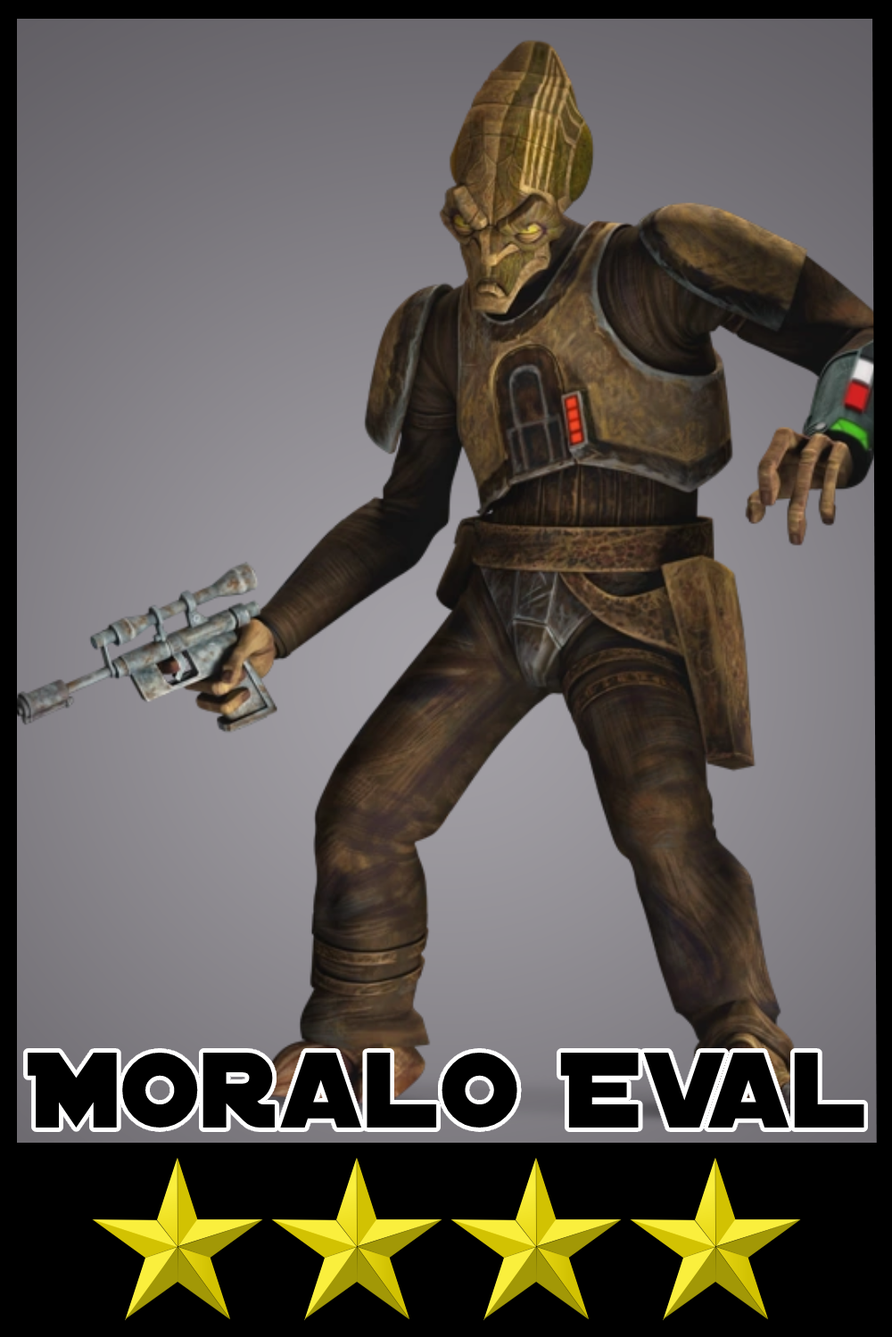
<style>
.page{position:relative;width:892px;height:1337px}
.page>*{position:absolute;margin:0}
.t1{font:115.4px "DistantGalaxy";color:#000000}
</style>
<div class="page">
<p class="t1" style="left:28px;top:1053px;width:836px;height:75px">Moralo Eval</p>
</div>
